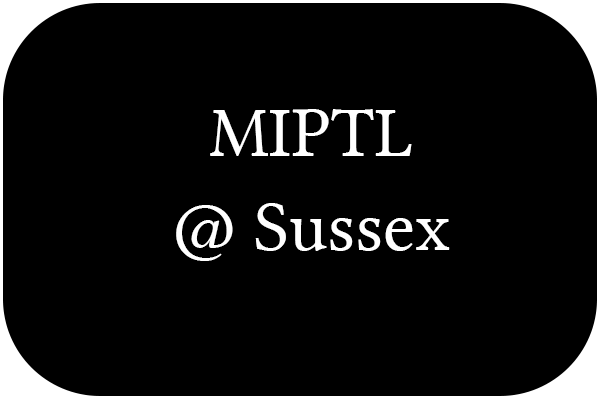
<style>
.page{position:relative;width:600px;height:400px;background:#000000}
.page>*{position:absolute;margin:0}
.t1{font:72px "LinLibertine";color:#ffffff}
</style>
<div class="page">
<p class="t1" style="left:176px;top:109px;width:274px;height:152px;text-align:center">MIPTL<br>@ Sussex</p>
</div>
